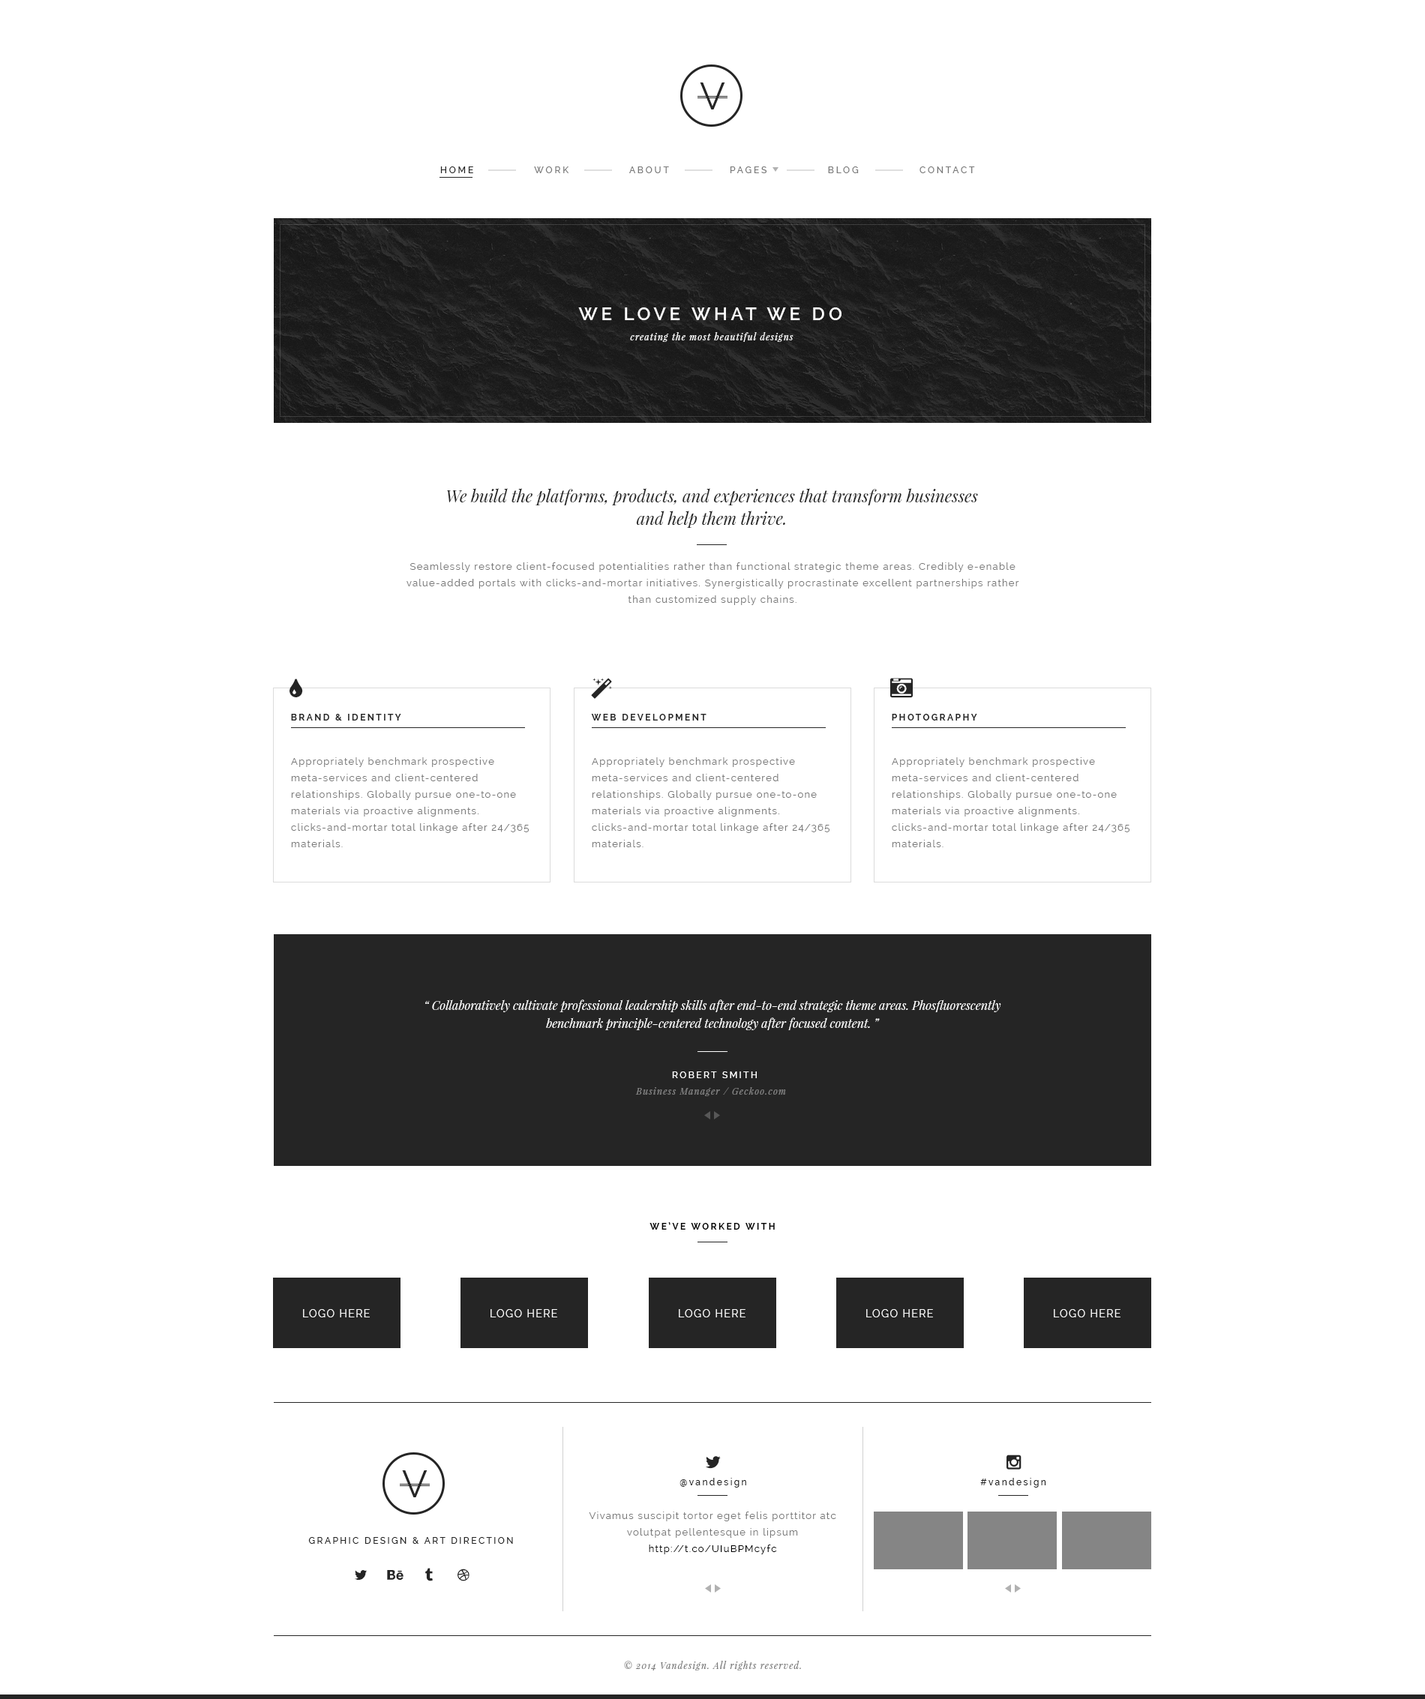
<style>
.page{position:relative;width:1425px;height:1699px;background:#ffffff}
.page>*{position:absolute;margin:0}
.t1{font:9px "Raleway-Medium";letter-spacing:0.2em;color:#7a7a7a;text-transform:uppercase;scale:1.04 1}
.t2{font:9px "Raleway-Medium";letter-spacing:0.2em;color:#252525;text-transform:uppercase;scale:1.04 1}
.t3{font:18px "Raleway-SemiBold";letter-spacing:0.2em;color:#ffffff}
.t4{font:9px "PlayfairDisplay-Italic";letter-spacing:0.1em;color:#ffffff}
.t5{font:16.5px/22.5px "PlayfairDisplay-Italic";color:#252525}
.t6{font:9.7px/16.5px "Raleway";letter-spacing:0.1em;color:#7a7a7a}
.t7{font:9px "Raleway-Bold";letter-spacing:0.2em;color:#252525;text-transform:uppercase}
.t8{font:12px/18px "PlayfairDisplay-Italic";color:#ffffff}
.t9{font:9px "Raleway-Medium";letter-spacing:0.2em;color:#ffffff;text-transform:uppercase}
.t10{font:9px "PlayfairDisplay-Italic";letter-spacing:0.1em;color:#848484}
.t11{font:9px "Raleway-Bold";letter-spacing:0.2em;color:#000000;text-transform:uppercase}
.t12{font:9px "Raleway-Medium";letter-spacing:0.2em;color:#252525}
.t13{font:9.7px/16.5px "Raleway";letter-spacing:0.1em;color:#000000}
.t14{font:9px "Raleway-Medium";letter-spacing:0.2em;color:#252525;text-transform:uppercase}
.t15{font:9px "PlayfairDisplay-Italic";letter-spacing:0.1em;color:#7a7a7a}
</style>
<div class="page">
<p class="t1" style="left:440px;top:166px;width:535px;height:7px"><span class="t2">HOME              </span>Work              About              Pages              Blog              Contact</p>
<p class="t3" style="left:578px;top:307px;width:263px;height:13px">WE LOVE WHAT WE DO</p>
<p class="t4" style="left:630px;top:332px;width:163px;height:10px">creating the most beautiful designs</p>
<p class="t5" style="left:447px;top:488px;width:531px;height:40px;text-align:center">We build the platforms, products, and experiences that transform businesses <br>and help them thrive.</p>
<p class="t6" style="left:406px;top:562px;width:613px;height:43px;text-align:center">Seamlessly restore client-focused potentialities rather than functional strategic theme areas. Credibly e-enable value-added portals with clicks-and-mortar initiatives. Synergistically procrastinate excellent partnerships rather than customized supply chains.</p>
<p class="t7" style="left:291px;top:714px;width:110px;height:7px">BRAND &amp; IDENTITY</p>
<p class="t7" style="left:591px;top:714px;width:115px;height:7px">WEB DEVELOPMENT</p>
<p class="t7" style="left:892px;top:714px;width:85px;height:7px">PHOTOGRAPHY</p>
<p class="t6" style="left:291px;top:757px;width:238px;height:90px">Appropriately benchmark prospective meta-services and client-centered relationships. Globally pursue one-to-one materials via proactive alignments. clicks-and-mortar total linkage after 24/365 materials.</p>
<p class="t6" style="left:592px;top:757px;width:237px;height:90px">Appropriately benchmark prospective meta-services and client-centered relationships. Globally pursue one-to-one materials via proactive alignments. clicks-and-mortar total linkage after 24/365 materials.</p>
<p class="t6" style="left:892px;top:757px;width:237px;height:90px">Appropriately benchmark prospective meta-services and client-centered relationships. Globally pursue one-to-one materials via proactive alignments. clicks-and-mortar total linkage after 24/365 materials.</p>
<p class="t8" style="left:425px;top:1000px;width:576px;height:30px;text-align:center">“ Collaboratively cultivate professional leadership skills after end-to-end strategic theme areas. Phosfluorescently benchmark principle-centered technology after focused content. ”</p>
<p class="t9" style="left:672px;top:1072px;width:85px;height:6px">ROBERT SMITH</p>
<p class="t10" style="left:635px;top:1087px;width:151px;height:9px">Business Manager / Geckoo.com</p>
<p class="t11" style="left:649px;top:1222px;width:126px;height:8px">we’ve worked with</p>
<p class="t12" style="left:679px;top:1478px;width:67px;height:10px">@vandesign</p>
<p class="t12" style="left:980px;top:1478px;width:66px;height:10px">#vandesign</p>
<p class="t6" style="left:589px;top:1512px;width:247px;height:43px;text-align:center">Vivamus suscipit tortor eget felis porttitor atc <br>volutpat pellentesque in lipsum<br><span class="t13">http://t.co/UIuBPMcyfc</span></p>
<p class="t14" style="left:308px;top:1537px;width:205px;height:7px">Graphic Design &amp; Art Direction</p>
<p class="t15" style="left:624px;top:1661px;width:177px;height:10px">© 2014 Vandesign. All rights reserved.</p>
</div>
